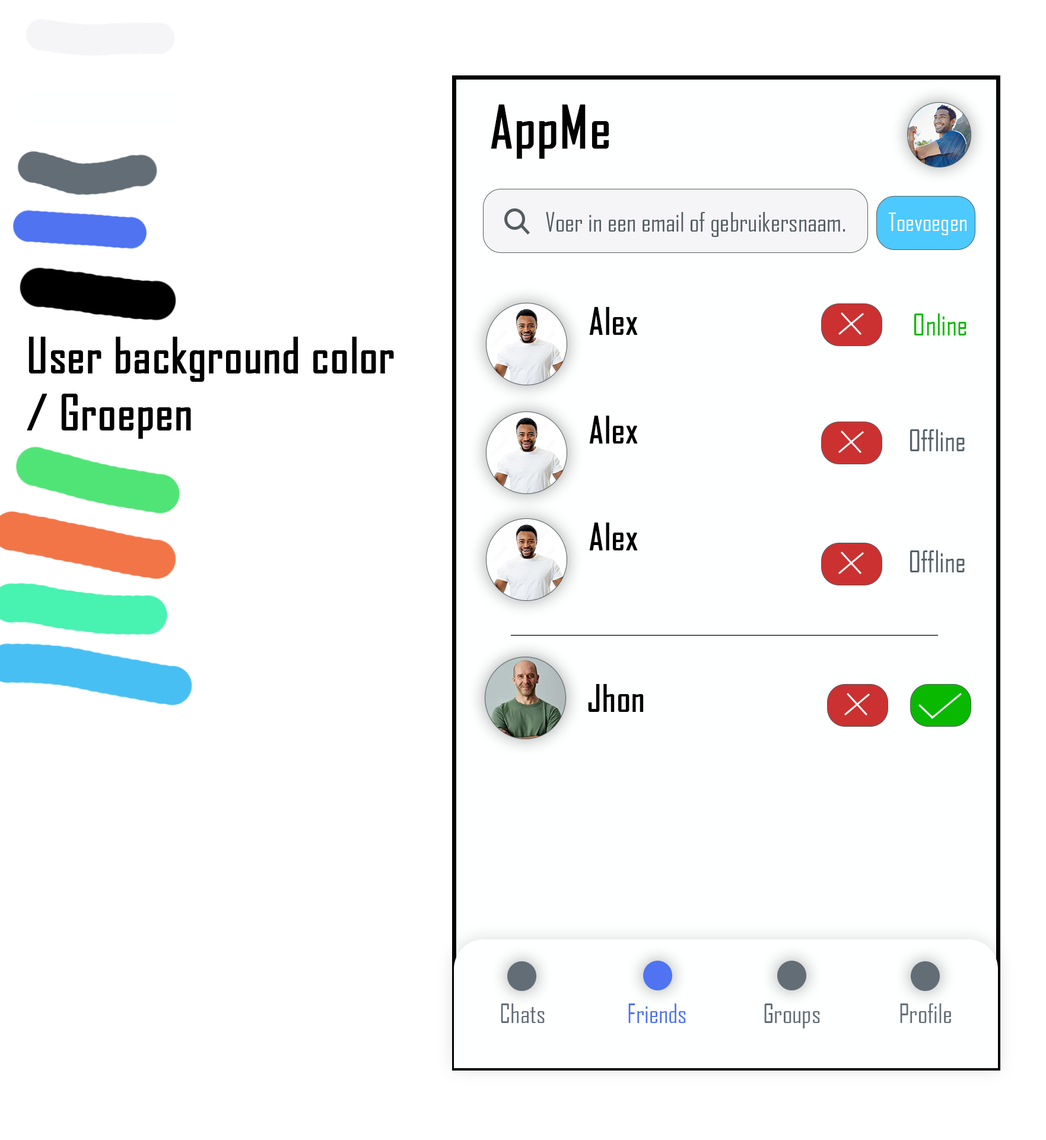
<style>
.page{position:relative;width:1046px;height:1140px;background:#ffffff}
.page>*{position:absolute;margin:0}
.t1{font:56.4px "AgencyFB-Reg";color:#000000;font-weight:bold}
.t2{font:25.7px "AgencyFB-Reg";color:#535c60}
.t3{font:24px "AgencyFB-Reg";color:#ffffff}
.t4{font:35.6px "AgencyFB-Reg";color:#000000;font-weight:bold}
.t5{font:28.5px "AgencyFB-Reg";color:#09b900}
.t6{font:47.5px "AgencyFB-Reg";color:#000000;font-weight:bold}
.t7{font:28.5px "AgencyFB-Reg";color:#56636a}
.t8{font:25.6px "AgencyFB-Reg";color:#636d76}
.t9{font:25.6px "AgencyFB-Reg";color:#4f73f1}
</style>
<div class="page">
<p class="t1" style="left:491px;top:104px;width:118px;height:55px">AppMe</p>
<p class="t2" style="left:546px;top:212px;width:300px;height:25px">Voer in een email of gebruikersnaam.</p>
<p class="t3" style="left:889px;top:212px;width:78px;height:23px">Toevoegen</p>
<p class="t4" style="left:589px;top:307px;width:49px;height:28px">Alex</p>
<p class="t5" style="left:914px;top:313px;width:53px;height:22px">Online</p>
<p class="t6" style="left:27px;top:337px;width:367px;height:102px">User background color<br>/ Groepen</p>
<p class="t4" style="left:589px;top:415px;width:49px;height:28px">Alex</p>
<p class="t7" style="left:910px;top:429px;width:55px;height:22px">Offline</p>
<p class="t4" style="left:589px;top:522px;width:49px;height:28px">Alex</p>
<p class="t7" style="left:910px;top:550px;width:55px;height:22px">Offline</p>
<p class="t4" style="left:588px;top:684px;width:56px;height:28px">Jhon</p>
<p class="t8" style="left:501px;top:1003px;width:44px;height:20px">Chats</p>
<p class="t9" style="left:629px;top:1003px;width:57px;height:20px">Friends</p>
<p class="t8" style="left:764px;top:1003px;width:56px;height:25px">Groups</p>
<p class="t8" style="left:900px;top:1003px;width:51px;height:20px">Profile</p>
</div>
